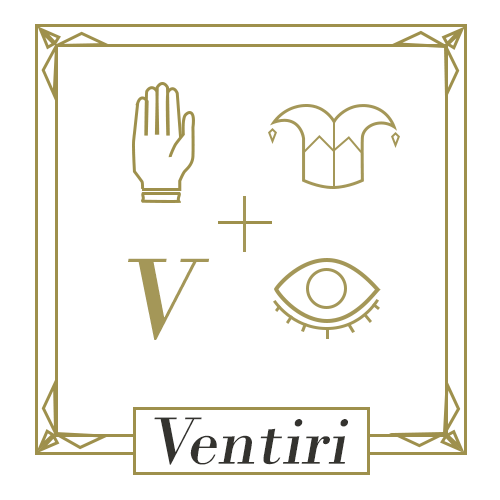
<style>
.page{position:relative;width:500px;height:500px;background:#ffffff}
.page>*{position:absolute;margin:0}
.t1{font:121px "BodoniMT";color:#a49758;font-style:italic}
.t2{font:70.8px "BodoniMT";color:#34332f;font-style:italic}
</style>
<div class="page">
<p class="t1" style="left:128px;top:258px;width:82px;height:82px">V</p>
<p class="t2" style="left:154px;top:417px;width:194px;height:48px">Ventiri</p>
</div>
